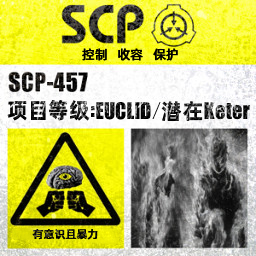
<style>
.page{position:relative;width:256px;height:256px}
.page>*{position:absolute;margin:0}
.t1{font:13px "AlibabaPuHuiTiM";color:#000000}
.t2{font:25px "URWImpactW01-Bold";letter-spacing:0.02em;scale:0.95 1}
.t3{font:22px "AlibabaPuHuiTiB";scale:0.95 1}
.t4{font:30px "URWImpactW01-Bold";letter-spacing:0.02em;scale:0.95 1}
.t5{font:22px "AlibabaPuHuiTiB";letter-spacing:0.02em;scale:0.95 1}
.t6{font:11px "AlibabaPuHuiTiM";letter-spacing:0.02em;color:#000000}
</style>
<div class="page">
<p class="t1" style="left:82px;top:48px;width:96px;height:13px">控制   收容   保护</p>
<p class="t2" style="left:7px;top:100px;width:243px;height:21px"><span class="t3">项目等级</span><span class="t4">:</span>EUCLID/<span class="t5">潜在</span>Keter</p>
<p class="t6" style="left:32px;top:229px;width:66px;height:11px">有意识且暴力</p>
</div>
